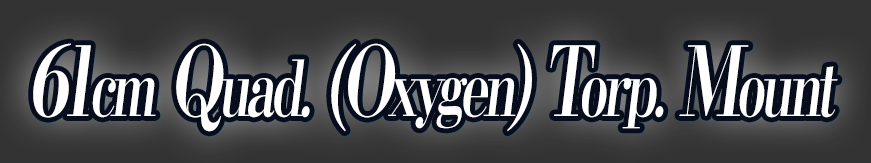
<style>
.page{position:relative;width:871px;height:163px}
.page>*{position:absolute;margin:0}
.t1{font:76.8px "KochoStd-Heavy";letter-spacing:-0.08em;color:#ffffff;font-style:italic;scale:0.69 1}
.t2{font:96px "KochoStd-Heavy";letter-spacing:-0.08em;color:#ffffff;font-style:italic;scale:0.69 1}
</style>
<div class="page">
<p class="t1" style="left:33px;top:43px;width:805px;height:89px"><span class="t2">61</span>cm<span class="t2"> Q</span>uad.<span class="t2"> (O</span>xygen<span class="t2">) T</span>orp.<span class="t2"> M</span>ount</p>
</div>
